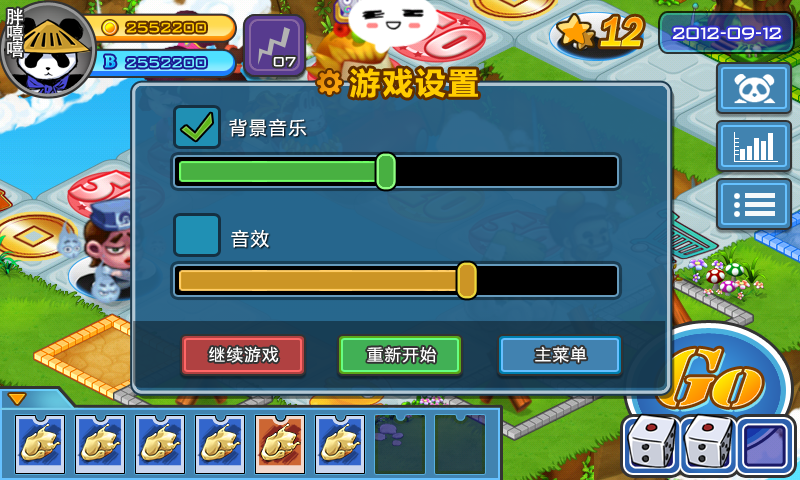
<style>
.page{position:relative;width:800px;height:480px}
.page>*{position:absolute;margin:0}
.t1{font:30px "MicrosoftYaHei-Bold";letter-spacing:0.12em;color:#ffcc00}
.t2{font:18px "MicrosoftYaHei";letter-spacing:0.1em;color:#ffffff}
.t3{font:16px "MicrosoftYaHei";letter-spacing:0.1em;color:#ffffff}
</style>
<div class="page">
<p class="t1" style="left:350px;top:68px;width:128px;height:30px">游戏设置</p>
<p class="t2" style="left:229px;top:118px;width:78px;height:19px">背景音乐</p>
<p class="t2" style="left:231px;top:229px;width:38px;height:19px">音效</p>
<p class="t3" style="left:209px;top:346px;width:70px;height:17px">继续游戏</p>
<p class="t3" style="left:367px;top:346px;width:70px;height:17px">重新开始</p>
<p class="t3" style="left:535px;top:346px;width:52px;height:17px">主菜单</p>
</div>
